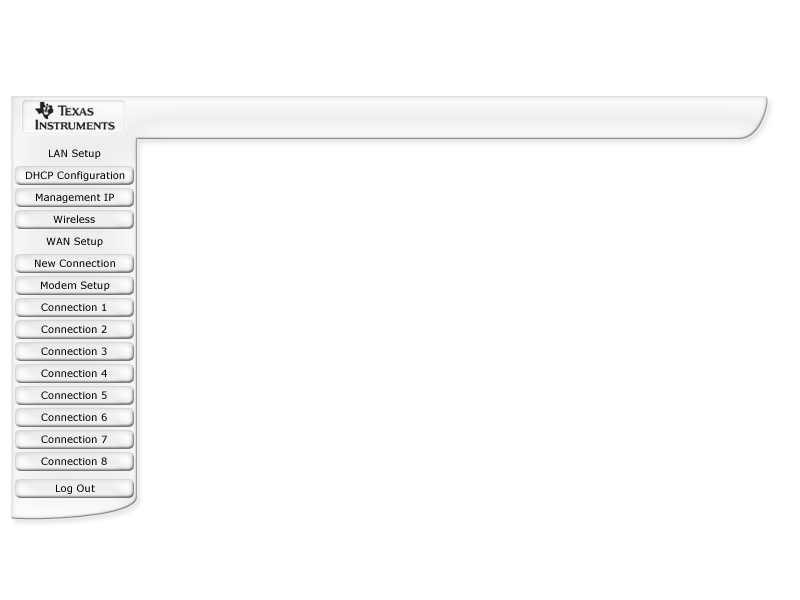
<style>
.page{position:relative;width:800px;height:600px;background:#ffffff}
.page>*{position:absolute;margin:0}
.t1{font:10px "Verdana";color:#000000}
.t2{font:10px "Verdana";letter-spacing:0.005em;color:#000000}
</style>
<div class="page">
<p class="t1" style="left:49px;top:149px;width:52px;height:10px">LAN Setup</p>
<p class="t2" style="left:26px;top:171px;width:99px;height:10px">DHCP Configuration</p>
<p class="t2" style="left:36px;top:193px;width:78px;height:10px">Management IP</p>
<p class="t2" style="left:53px;top:215px;width:42px;height:8px">Wireless</p>
<p class="t1" style="left:46px;top:237px;width:57px;height:10px">WAN Setup</p>
<p class="t2" style="left:35px;top:259px;width:80px;height:8px">New Connection</p>
<p class="t2" style="left:41px;top:281px;width:69px;height:10px">Modem Setup</p>
<p class="t2" style="left:41px;top:303px;width:66px;height:8px">Connection 1</p>
<p class="t2" style="left:41px;top:325px;width:66px;height:8px">Connection 2</p>
<p class="t2" style="left:41px;top:347px;width:66px;height:8px">Connection 3</p>
<p class="t2" style="left:41px;top:369px;width:66px;height:8px">Connection 4</p>
<p class="t2" style="left:41px;top:391px;width:66px;height:8px">Connection 5</p>
<p class="t2" style="left:41px;top:413px;width:66px;height:8px">Connection 6</p>
<p class="t2" style="left:41px;top:435px;width:66px;height:8px">Connection 7</p>
<p class="t2" style="left:41px;top:457px;width:66px;height:8px">Connection 8</p>
<p class="t2" style="left:56px;top:484px;width:39px;height:10px">Log Out</p>
</div>
